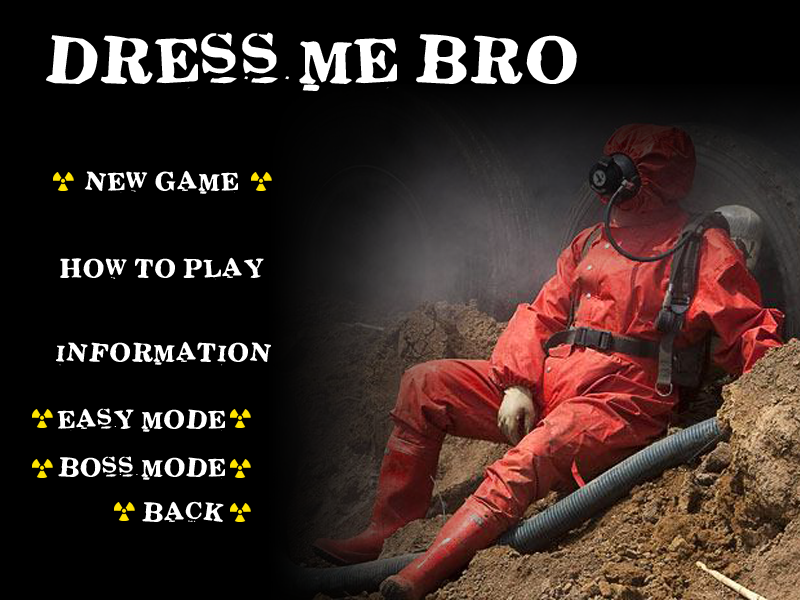
<style>
.page{position:relative;width:800px;height:600px;background:#000000}
.page>*{position:absolute;margin:0}
.t1{font:60px "Stickons-Two";color:#ffffff}
.t2{font:24px "Stickons-Two";color:#ffffff}
</style>
<div class="page">
<p class="t1" style="left:46px;top:32px;width:531px;height:59px">Dress me Bro</p>
<p class="t2" style="left:84px;top:170px;width:154px;height:24px">New Game</p>
<p class="t2" style="left:60px;top:257px;width:204px;height:23px">How to Play</p>
<p class="t2" style="left:56px;top:341px;width:215px;height:25px">Information</p>
<p class="t2" style="left:57px;top:408px;width:168px;height:24px">Easy Mode</p>
<p class="t2" style="left:58px;top:456px;width:167px;height:24px">Boss Mode</p>
<p class="t2" style="left:142px;top:501px;width:82px;height:21px">&lt;&lt;Back</p>
</div>
